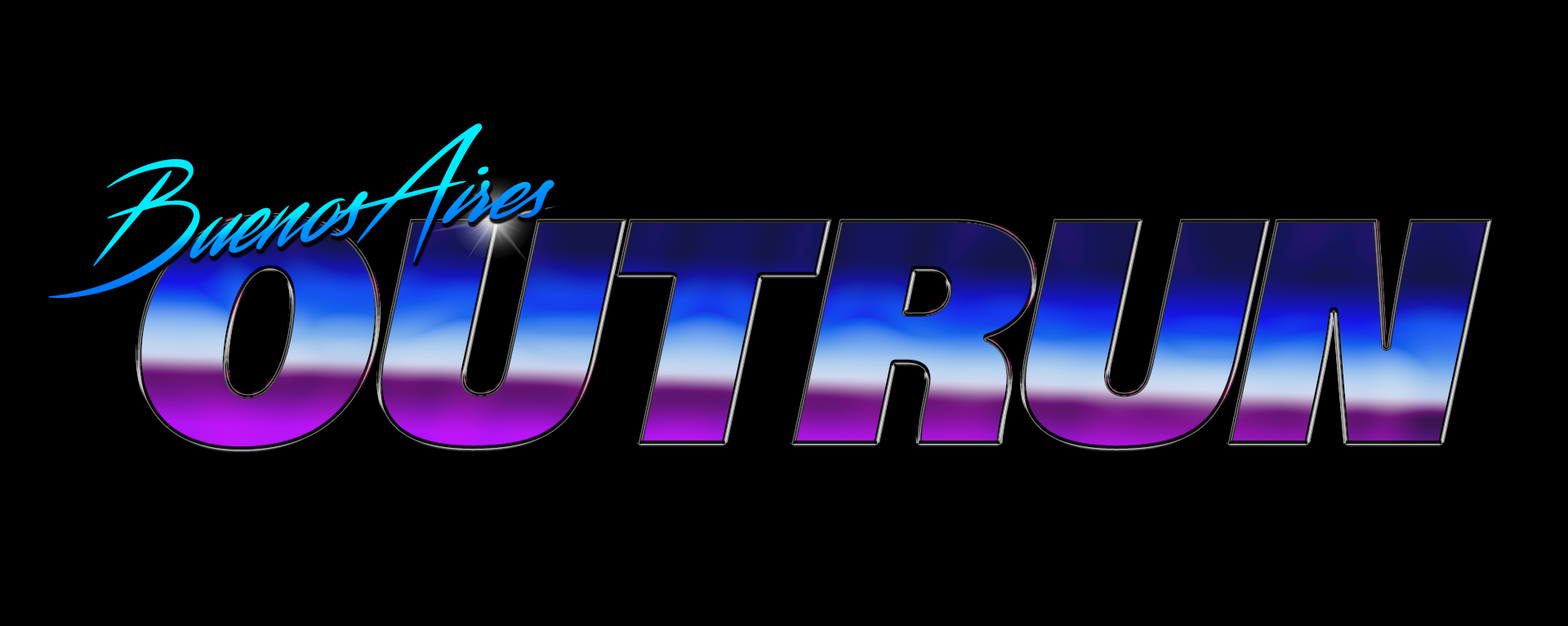
<style>
.page{position:relative;width:1568px;height:626px;background:#000000}
.page>*{position:absolute;margin:0}
.t1{font:109px "Streamster"}
.t2{font:327.1px "AcuminConcept-UltraBlackItalic";letter-spacing:-0.04em}
.t3{font:327.1px "AcuminConcept-UltraBlackItalic";letter-spacing:-0.06em}
.t4{font:327.1px "AcuminConcept-UltraBlackItalic";letter-spacing:-0.075em}
</style>
<div class="page">
<p class="t1" style="left:48px;top:123px;width:507px;height:175px;rotate:3deg">BuenosAires</p>
<p class="t2" style="left:137px;top:213px;width:1353px;height:239px"><span class="t3">O</span>UT<span class="t3">R</span><span class="t4">U</span>N</p>
<p class="t2" style="left:137px;top:213px;width:1353px;height:239px"><span class="t3">O</span>UT<span class="t3">R</span><span class="t4">U</span>N</p>
</div>
